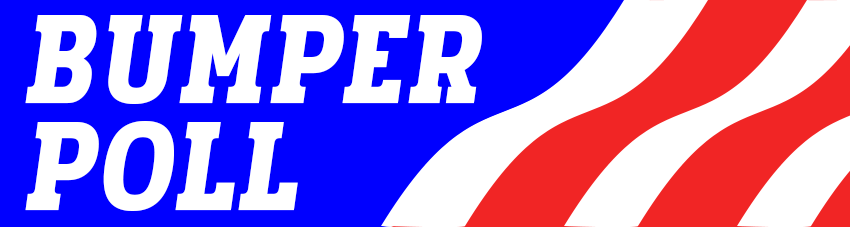
<style>
.page{position:relative;width:850px;height:227px;background:#ffffff}
.page>*{position:absolute;margin:0}
.t1{font:134.5px/106.8px "Pridi-Bold";letter-spacing:0.075em;color:#ffffff;font-style:italic;scale:0.79 1}
</style>
<div class="page">
<p class="t1" style="left:25px;top:15px;width:457px;height:196px">BUMPER<br>POLL</p>
</div>
